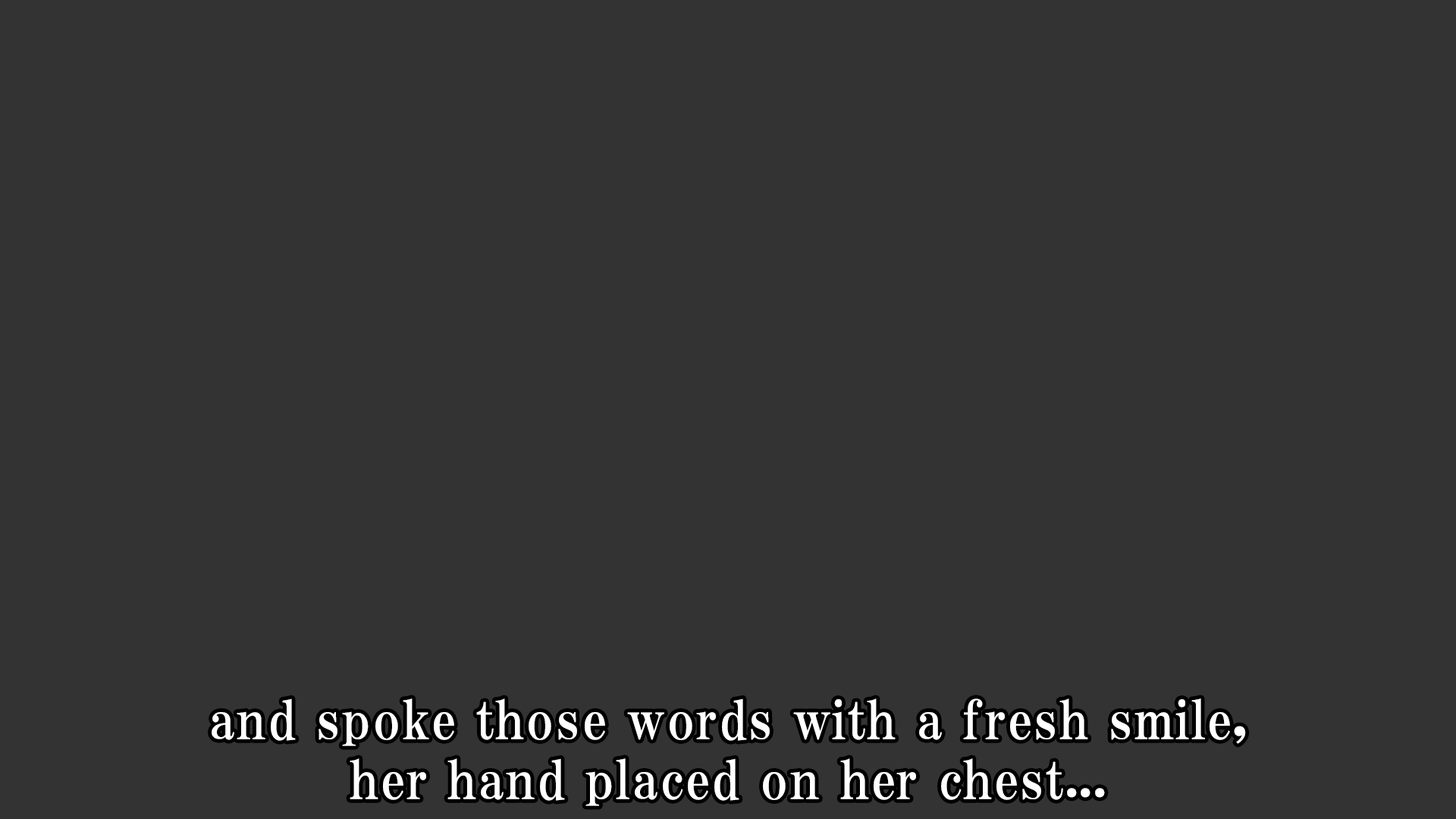
<style>
.page{position:relative;width:1456px;height:819px;background:#333333}
.page>*{position:absolute;margin:0}
.t1{font:53.1px/59.9px "HGPMinchoE";letter-spacing:0.025em;color:#ffffff}
</style>
<div class="page">
<p class="t1" style="left:212px;top:698px;width:1034px;height:108px;text-align:center">and spoke those words with a fresh smile,<br>her hand placed on her chest...</p>
</div>
